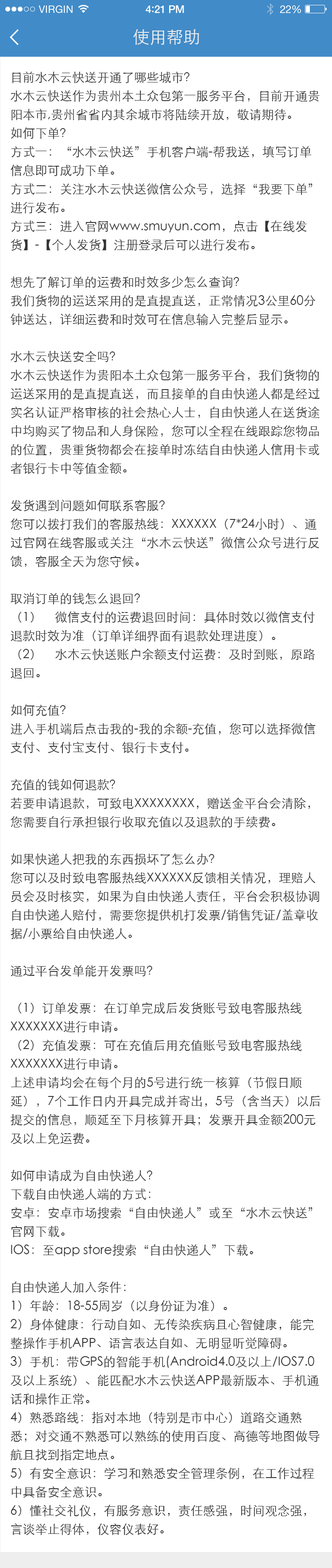
<style>
.page{position:relative;width:332px;height:1568px;background:#ffffff}
.page>*{position:absolute;margin:0}
.t1{font:10.2px "HelveticaNeue";letter-spacing:0.02em;color:#ffffff}
.t2{font:10.6px "HelveticaNeue-Medium";letter-spacing:-0.02em;color:#ffffff}
.t3{font:11.5px "Avenir-Medium";letter-spacing:-0.02em;color:#ffffff}
.t4{font:10.6px "HelveticaNeue";letter-spacing:-0.02em;color:#ffffff}
.t5{font:16.8px "STXihei";color:#eeeeee}
.t6{font:12.4px/18.6px "STXihei";color:#333333}
</style>
<div class="page">
<p class="t1" style="left:39px;top:5px;width:34px;height:8px">VIRGIN</p>
<p class="t2" style="left:146px;top:5px;width:38px;height:8px">4<span class="t3">:</span>21 PM</p>
<p class="t4" style="left:280px;top:5px;width:21px;height:8px">22%</p>
<p class="t5" style="left:133px;top:29px;width:66px;height:16px">使用帮助</p>
<p class="t6" style="left:10px;top:71px;width:311px;height:1464px">目前水木云快送开通了哪些城市？<br>水木云快送作为贵州本土众包第一服务平台，目前开通贵阳本市,贵州省省内其余城市将陆续开放，敬请期待。<br>如何下单？<br>方式一：“水木云快送”手机客户端-帮我送，填写订单信息即可成功下单。<br>方式二：关注水木云快送微信公众号，选择“我要下单”进行发布。<br>方式三：进入官网www.smuyun.com，点击【在线发货】-【个人发货】注册登录后可以进行发布。<br><br>想先了解订单的运费和时效多少怎么查询？<br>我们货物的运送采用的是直提直送，正常情况3公里60分钟送达，详细运费和时效可在信息输入完整后显示。<br><br>水木云快送安全吗？<br>水木云快送作为贵阳本土众包第一服务平台，我们货物的运送采用的是直提直送，而且接单的自由快递人都是经过实名认证严格审核的社会热心人士，自由快递人在送货途中均购买了物品和人身保险，您可以全程在线跟踪您物品的位置，贵重货物都会在接单时冻结自由快递人信用卡或者银行卡中等值金额。<br><br>发货遇到问题如何联系客服？<br>您可以拨打我们的客服热线：XXXXXX（7*24小时）、通过官网在线客服或关注“水木云快送”微信公众号进行反馈，客服全天为您守候。<br><br>取消订单的钱怎么退回？<br>（1） 微信支付的运费退回时间：具体时效以微信支付退款时效为准（订单详细界面有退款处理进度）。<br>（2） 水木云快送账户余额支付运费：及时到账，原路退回。<br><br>如何充值？<br>进入手机端后点击我的-我的余额-充值，您可以选择微信支付、支付宝支付、银行卡支付。<br><br>充值的钱如何退款？<br>若要申请退款，可致电XXXXXXXX，赠送金平台会清除，您需要自行承担银行收取充值以及退款的手续费。<br><br>如果快递人把我的东西损坏了怎么办？<br>您可以及时致电客服热线XXXXXX反馈相关情况，理赔人员会及时核实，如果为自由快递人责任，平台会积极协调自由快递人赔付，需要您提供机打发票/销售凭证/盖章收据/小票给自由快递人。<br><br>通过平台发单能开发票吗？<br><br>（1）订单发票：在订单完成后发货账号致电客服热线XXXXXXX进行申请。<br>（2）充值发票：可在充值后用充值账号致电客服热线XXXXXXX进行申请。<br>上述申请均会在每个月的5号进行统一核算（节假日顺延），7个工作日内开具完成并寄出，5号（含当天）以后提交的信息，顺延至下月核算开具；发票开具金额200元及以上免运费。<br><br>如何申请成为自由快递人？<br>下载自由快递人端的方式：<br>安卓：安卓市场搜索“自由快递人”或至“水木云快送”官网下载。<br>IOS：至app store搜索“自由快递人”下载。<br><br>自由快递人加入条件：<br>1）年龄：18-55周岁（以身份证为准）。<br>2）身体健康：行动自如、无传染疾病且心智健康，能完整操作手机APP、语言表达自如、无明显听觉障碍。<br>3）手机：带GPS的智能手机(Android4.0及以上/IOS7.0及以上系统）、能匹配水木云快送APP最新版本、手机通话和操作正常。<br>4）熟悉路线：指对本地（特别是市中心）道路交通熟悉；对交通不熟悉可以熟练的使用百度、高德等地图做导航且找到指定地点。<br>5）有安全意识：学习和熟悉安全管理条例，在工作过程中具备安全意识。<br>6）懂社交礼仪，有服务意识，责任感强，时间观念强，言谈举止得体，仪容仪表好。</p>
</div>
